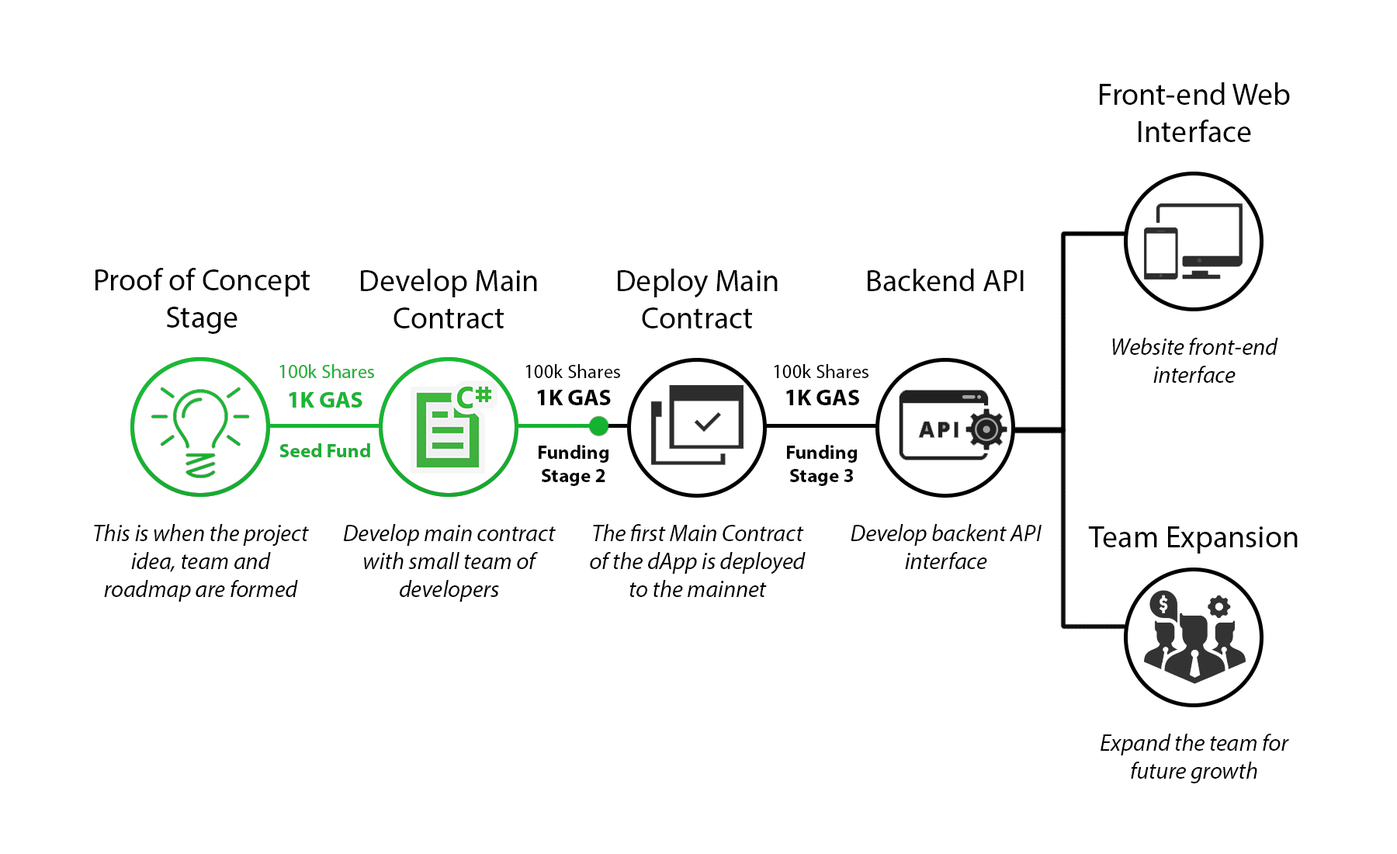
<style>
.page{position:relative;width:1397px;height:854px;background:#ffffff}
.page>*{position:absolute;margin:0}
.t1{font:31px "MyriadPro-Regular";color:#000000}
.t2{font:23.3px "MyriadPro-It";color:#000000}
.t3{font:19.4px "MyriadPro-Regular";color:#15bc34}
.t4{font:19.4px "MyriadPro-Regular";color:#000000}
.t5{font:23px "MyriadPro-Bold";color:#000000}
.t6{font:23.2px "MyriadPro-Bold";color:#15b833}
.t7{font:19.4px "MyriadPro-Bold";color:#14b331}
.t8{font:19.4px "MyriadPro-Bold";color:#000000}
</style>
<div class="page">
<p class="t1" style="left:1100px;top:82px;width:190px;height:60px;text-align:center">Front-end Web Interface</p>
<p class="t1" style="left:95px;top:268px;width:215px;height:66px;text-align:center">Proof of Concept Stage</p>
<p class="t1" style="left:361px;top:269px;width:176px;height:59px;text-align:center">Develop Main Contract</p>
<p class="t1" style="left:618px;top:269px;width:160px;height:59px;text-align:center">Deploy Main Contract</p>
<p class="t1" style="left:868px;top:269px;width:156px;height:22px">Backend API</p>
<p class="t2" style="left:1112px;top:338px;width:166px;height:45px;text-align:center">Website front-end interface</p>
<p class="t3" style="left:279px;top:364px;width:95px;height:14px">100k Shares</p>
<p class="t4" style="left:525px;top:364px;width:95px;height:14px">100k Shares</p>
<p class="t4" style="left:774px;top:364px;width:94px;height:14px">100k Shares</p>
<p class="t5" style="left:537px;top:390px;width:74px;height:15px">1K GAS</p>
<p class="t5" style="left:786px;top:390px;width:73px;height:15px">1K GAS</p>
<p class="t6" style="left:289px;top:392px;width:73px;height:15px">1K GAS</p>
<p class="t7" style="left:279px;top:443px;width:91px;height:14px">Seed Fund</p>
<p class="t8" style="left:539px;top:445px;width:69px;height:41px;text-align:center">Funding Stage 2</p>
<p class="t8" style="left:787px;top:445px;width:70px;height:41px;text-align:center">Funding Stage 3</p>
<p class="t2" style="left:94px;top:524px;width:215px;height:77px;text-align:center">This is when the project idea, team and roadmap are formed</p>
<p class="t2" style="left:343px;top:524px;width:213px;height:77px;text-align:center">Develop main contract with small team of developers</p>
<p class="t2" style="left:590px;top:524px;width:216px;height:73px;text-align:center">The first Main Contract of the dApp is deployed to the mainnet</p>
<p class="t2" style="left:851px;top:524px;width:190px;height:45px;text-align:center">Develop backent API interface</p>
<p class="t1" style="left:1088px;top:526px;width:210px;height:27px">Team Expansion</p>
<p class="t2" style="left:1100px;top:733px;width:189px;height:50px;text-align:center">Expand the team for future growth</p>
</div>
